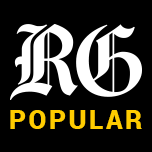
<style>
.page{position:relative;width:152px;height:152px;background:#000000}
.page>*{position:absolute;margin:0}
.t1{font:26px "Roboto-Black";letter-spacing:0.1em;color:#ffcc00;text-transform:uppercase}
</style>
<div class="page">
<p class="t1" style="left:10px;top:110px;width:132px;height:19px">Popular</p>
</div>
